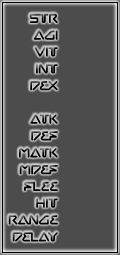
<style>
.page{position:relative;width:120px;height:255px;background:#4c4c4c}
.page>*{position:absolute;margin:0}
.t1{font:14px "Chilopod-Regular";color:#000000}
</style>
<div class="page">
<p class="t1" style="left:8px;top:13px;width:50px;height:229px;text-align:right">STR<br>AGI<br>VIT<br>INT<br>DEX<br><br>ATK<br>DEF<br>MATK<br>MDEF<br>FLEE<br>HIT<br>RANGE<br>DELAY</p>
</div>
